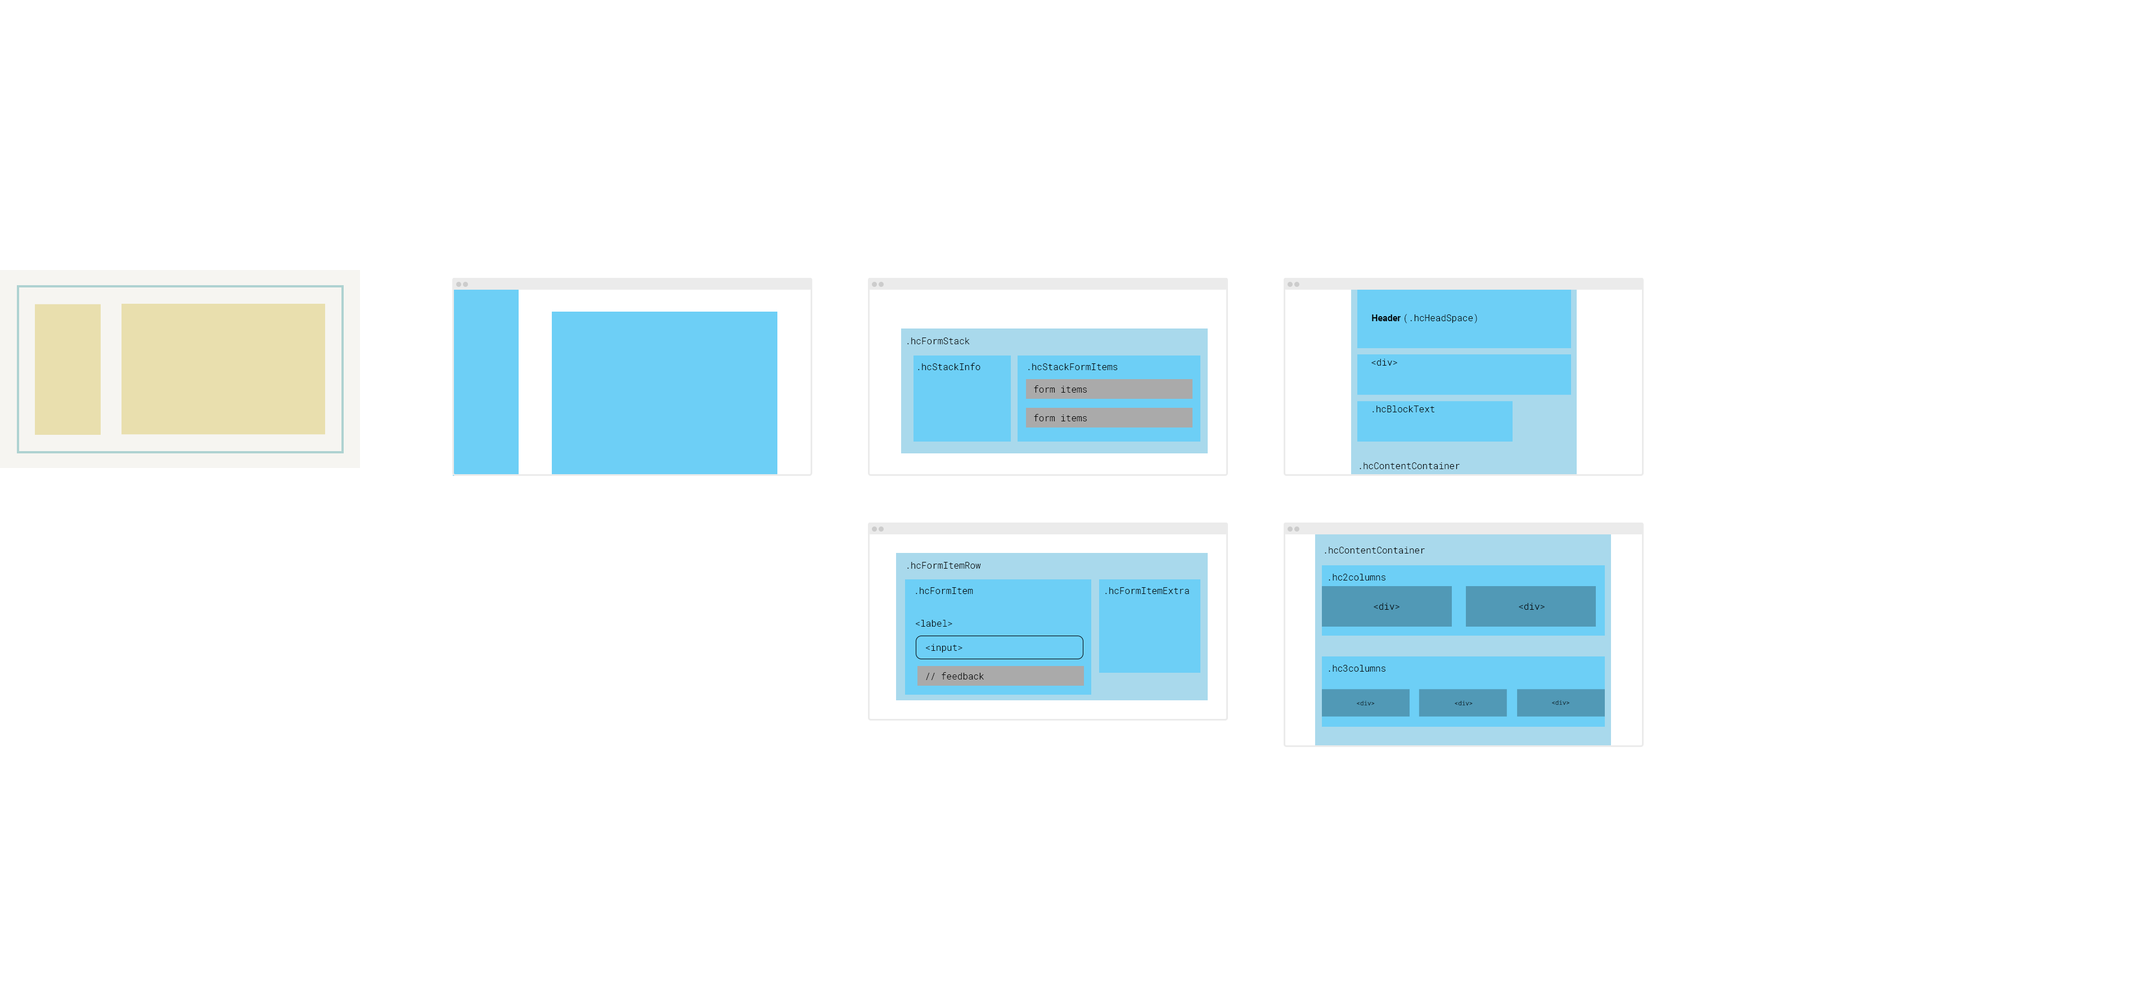
<style>
.page{position:relative;width:2133px;height:1008px;background:#ffffff}
.page>*{position:absolute;margin:0}
.t1{font:9px "RobotoMono-Light";color:#000000}
.t2{font:9px "Roboto-Bold";color:#000000}
.t3{font:6.1px "RobotoMono-Light"}
.t4{font:6.1px "RobotoMono-Light";color:#000000}
</style>
<div class="page">
<p class="t1" style="left:1372px;top:314px;width:105px;height:9px"><span class="t2">Header </span>(.hcHeadSpace)</p>
<p class="t1" style="left:907px;top:338px;width:63px;height:6px">.hcFormStack</p>
<p class="t1" style="left:918px;top:363px;width:62px;height:7px">.hcStackInfo</p>
<p class="t1" style="left:1028px;top:363px;width:90px;height:7px">.hcStackFormItems</p>
<p class="t1" style="left:1371px;top:359px;width:26px;height:7px">&lt;div&gt;</p>
<p class="t1" style="left:1034px;top:385px;width:53px;height:8px">form items</p>
<p class="t1" style="left:1034px;top:414px;width:53px;height:7px">form items</p>
<p class="t1" style="left:1372px;top:406px;width:62px;height:6px">.hcBlockText</p>
<p class="t1" style="left:1360px;top:462px;width:100px;height:7px">.hcContentContainer</p>
<p class="t1" style="left:1325px;top:547px;width:100px;height:7px">.hcContentContainer</p>
<p class="t1" style="left:907px;top:562px;width:74px;height:7px">.hcFormItemRow</p>
<p class="t1" style="left:1329px;top:574px;width:56px;height:6px">.hc2columns</p>
<p class="t1" style="left:916px;top:587px;width:57px;height:7px">.hcFormItem</p>
<p class="t1" style="left:1105px;top:587px;width:84px;height:7px">.hcFormItemExtra</p>
<p class="t1" style="left:1374px;top:603px;width:26px;height:7px">&lt;div&gt;</p>
<p class="t1" style="left:1519px;top:603px;width:26px;height:7px">&lt;div&gt;</p>
<p class="t1" style="left:915px;top:620px;width:37px;height:7px">&lt;label&gt;</p>
<p class="t1" style="left:925px;top:644px;width:37px;height:8px">&lt;input&gt;</p>
<p class="t1" style="left:1329px;top:665px;width:56px;height:7px">.hc3columns</p>
<p class="t1" style="left:926px;top:672px;width:58px;height:8px">// feedback</p>
<p class="t3" style="left:1357px;top:701px;width:18px;height:4px">&lt;div&gt;</p>
<p class="t4" style="left:1455px;top:701px;width:18px;height:4px">&lt;div&gt;</p>
<p class="t3" style="left:1552px;top:700px;width:17px;height:5px">&lt;div&gt;</p>
</div>
